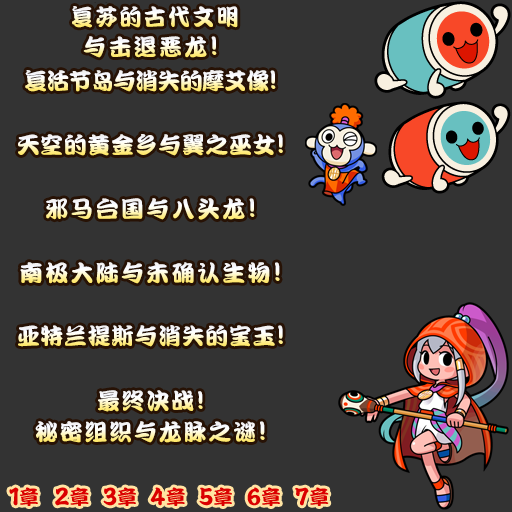
<style>
.page{position:relative;width:512px;height:512px;background:#333333}
.page>*{position:absolute;margin:0}
.t1{font:23px "DFPKanTingLiuW9";letter-spacing:0.1em;scale:0.96 1}
.t2{font:23px "DFPKanTingLiuW9";letter-spacing:0.1em}
.t3{font:27px "DFPKanTingLiuW9";letter-spacing:0.1em}
.t4{font:23px "DFPKanTingLiuW9";letter-spacing:-0.035em}
.t5{font:27px "DFPKanTingLiuW9";letter-spacing:-0.035em}
.t6{font:23px "DFPKanTingLiuW9";letter-spacing:0.025em}
.t7{font:27px "DFPKanTingLiuW9";letter-spacing:0.025em}
.t8{font:23px "DFPKanTingLiuW9";letter-spacing:0.075em}
.t9{font:26px "DFPKanTingLiuW9";letter-spacing:0.075em}
.t10{font:27px "DFPKanTingLiuW9";letter-spacing:0.075em}
</style>
<div class="page">
<p class="t1" style="left:72px;top:6px;width:166px;height:22px">复苏的古代文明</p>
<p class="t2" style="left:83px;top:36px;width:134px;height:22px">与击退恶龙<span class="t3">!</span></p>
<p class="t4" style="left:25px;top:70px;width:251px;height:22px">复活节岛与消失的摩艾像<span class="t5">!</span></p>
<p class="t6" style="left:18px;top:134px;width:265px;height:22px">天空的黄金乡与翼之巫女<span class="t7">!</span></p>
<p class="t2" style="left:46px;top:198px;width:209px;height:22px">邪马台国与八头龙<span class="t3">!</span></p>
<p class="t2" style="left:20px;top:262px;width:260px;height:22px">南极大陆与未确认生物<span class="t3">!</span></p>
<p class="t6" style="left:18px;top:325px;width:265px;height:22px">亚特兰提斯与消失的宝玉<span class="t7">!</span></p>
<p class="t8" style="left:98px;top:390px;width:105px;height:22px">最终决战<span class="t9">!</span></p>
<p class="t8" style="left:35px;top:421px;width:230px;height:22px">秘密组织与龙脉之谜<span class="t10">!</span></p>
</div>
